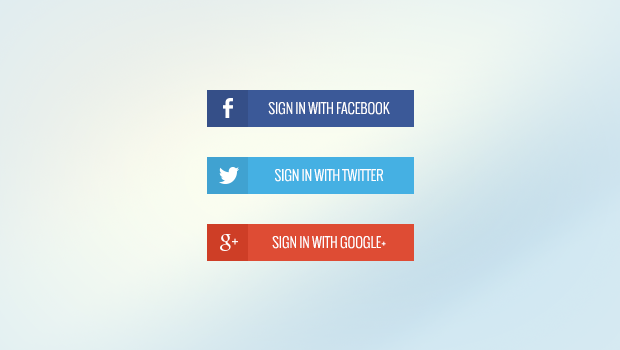
<style>
.page{position:relative;width:620px;height:350px}
.page>*{position:absolute;margin:0}
.t1{font:14px "Oswald-Light";color:#ffffff;text-transform:uppercase}
</style>
<div class="page">
<p class="t1" style="left:268px;top:102px;width:122px;height:13px">sign in with facebook</p>
<p class="t1" style="left:275px;top:169px;width:109px;height:13px">sign in with twitter</p>
<p class="t1" style="left:272px;top:236px;width:114px;height:13px">sign in with google+</p>
</div>
